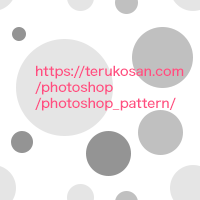
<style>
.page{position:relative;width:200px;height:200px;background:#ffffff}
.page>*{position:absolute;margin:0}
.t1{font:13px/16px "HiraginoSans-W5";color:#ff4d81}
</style>
<div class="page">
<p class="t1" style="left:35px;top:65px;width:149px;height:46px">https://terukosan.com<br>/photoshop<br>/photoshop_pattern/</p>
</div>
